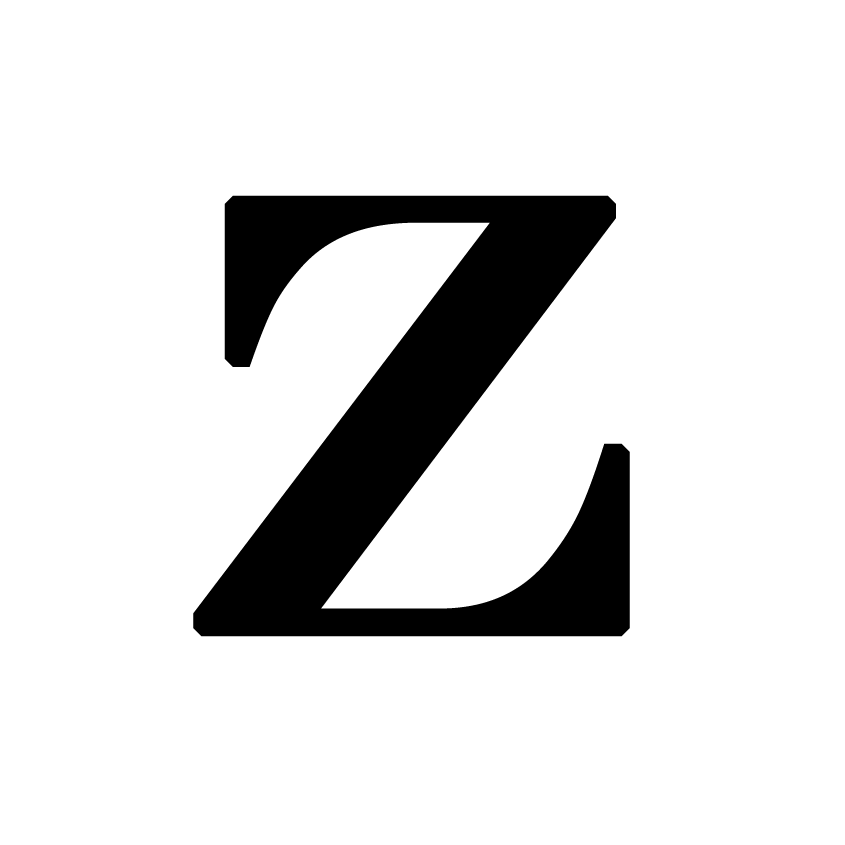
<style>
.page{position:relative;width:845px;height:845px;background:#ffffff}
.page>*{position:absolute;margin:0}
.t1{font:621.7px "EngraversMT";letter-spacing:0.01em;color:#000000;font-weight:bold}
.t2{font:86.3px "Garamond-Bold";letter-spacing:0.01em;color:#ffffff;font-weight:bold}
</style>
<div class="page">
<p class="t1" style="left:193px;top:195px;width:437px;height:442px"><span class="t2"> </span>Z</p>
</div>
